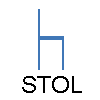
<style>
.page{position:relative;width:100px;height:100px;background:#ffffff}
.page>*{position:absolute;margin:0}
.t1{font:24px "ArialMT";color:#000000}
</style>
<div class="page">
<p class="t1" style="left:22px;top:76px;width:60px;height:17px">STOL</p>
</div>
